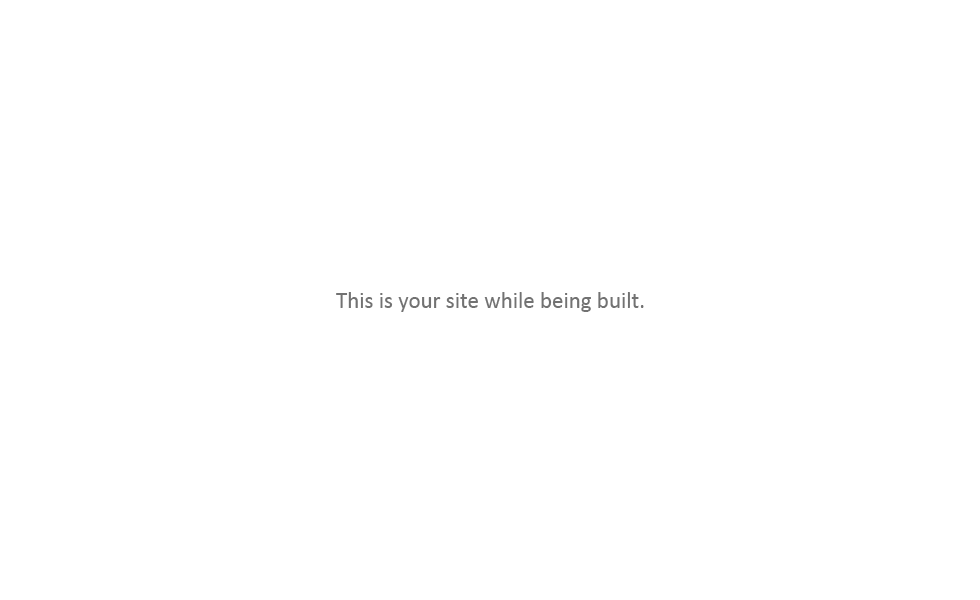
<style>
.page{position:relative;width:980px;height:600px;background:#ffffff}
.page>*{position:absolute;margin:0}
.t1{font:23px "Calibri";color:#727272}
</style>
<div class="page">
<p class="t1" style="left:336px;top:292px;width:308px;height:20px">This is your site while being built.</p>
</div>
